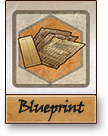
<style>
.page{position:relative;width:108px;height:136px}
.page>*{position:absolute;margin:0}
.t1{font:16px "VinerHandITC";letter-spacing:-0.08em;color:#1c1e1b;font-weight:bold}
</style>
<div class="page">
<p class="t1" style="left:18px;top:99px;width:67px;height:23px">Blueprint</p>
</div>
